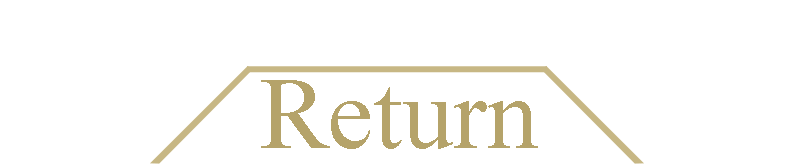
<style>
.page{position:relative;width:800px;height:164px;background:#ffffff}
.page>*{position:absolute;margin:0}
.t1{font:102px "TimesNewRomanPSMT";color:#b5a36a}
</style>
<div class="page">
<p class="t1" style="left:261px;top:80px;width:277px;height:69px">Return</p>
</div>
